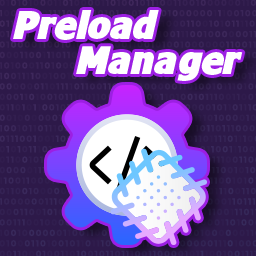
<style>
.page{position:relative;width:256px;height:256px;background:#2d1949}
.page>*{position:absolute;margin:0}
.t1{font:38.3px "Felix-Clean";color:#ffffff}
</style>
<div class="page">
<p class="t1" style="left:13px;top:10px;width:146px;height:30px">Preload</p>
<p class="t1" style="left:76px;top:46px;width:167px;height:35px">Manager</p>
</div>
